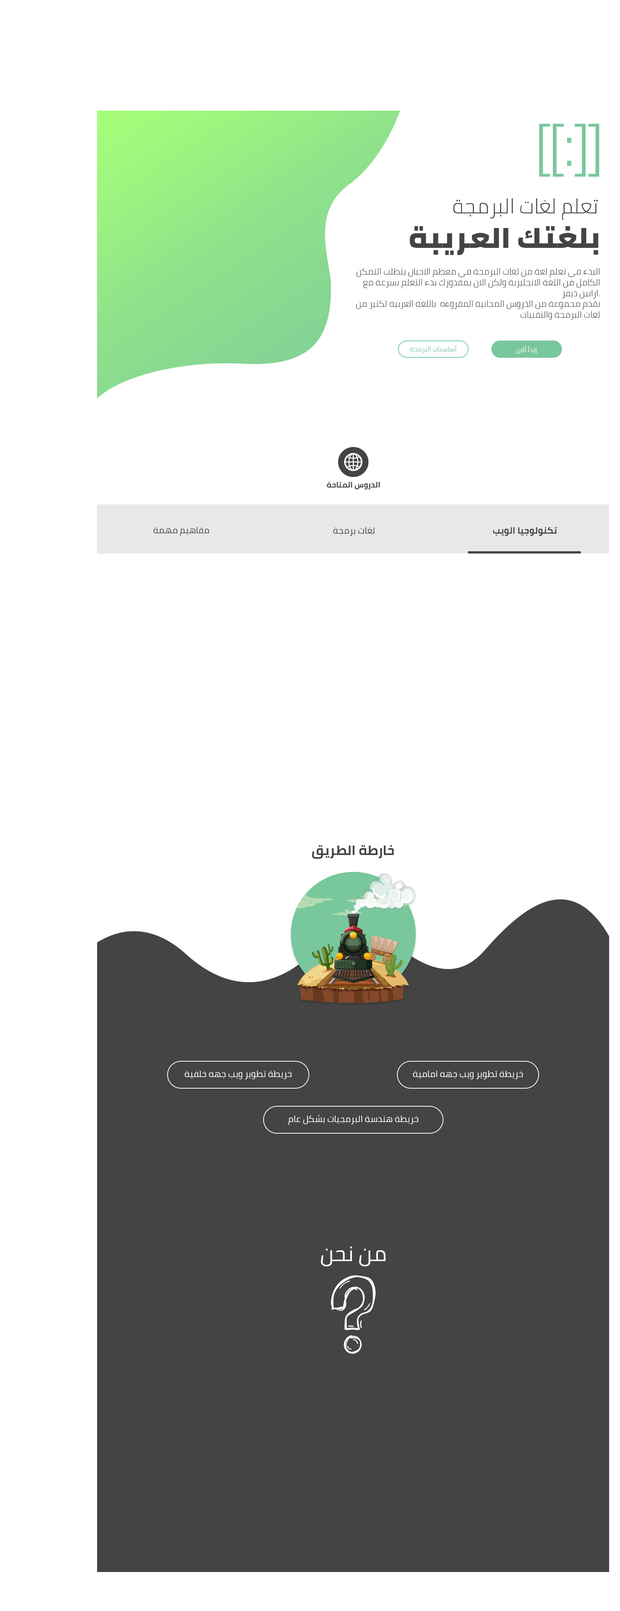
<style>
.page{position:relative;width:620px;height:1611px;background:#ffffff}
.page>*{position:absolute;margin:0}
.t1{font:20.5px "Cairo-Light";color:#444444}
.t2{font:29.2px "Cairo-Black";color:#444444}
.t3{font:9px "Cairo-Light";color:#444444}
.t4{font:6.8px "Cairo-Regular";color:#79c79c}
.t5{font:6.8px "Cairo-Regular";color:#ffffff}
.t6{font:7.8px "Cairo-Bold";color:#444444}
.t7{font:9px "Cairo-Regular";color:#444444}
.t8{font:9px "Cairo-Bold";color:#444444}
.t9{font:13.5px "Cairo-Bold";color:#444444}
.t10{font:9px "Cairo-Regular";color:#ffffff}
.t11{font:21.4px "Cairo-Regular";color:#ffffff}
</style>
<div class="page">
<p class="t1" style="left:453px;top:198px;width:145px;height:22px">تعلم لغات البرمجة</p>
<p class="t2" style="left:410px;top:226px;width:188px;height:29px">بلغتك العريبة</p>
<p class="t3" style="left:356px;top:268px;width:244px;height:52px;text-align:right">البدء في تعلم لغة من لغات البرمجة في معظم الاحيان يتطلب التمكن الكامل من اللغة الانجليزية ولكن الان بمقدورك بدء التعلم بسرعة مع ارابين ديفز.<br>نقدم مجموعة من الدروس المجانية المقروءه  باللغة العربية لكثير من لغات البرمجة والتقنيات</p>
<p class="t4" style="left:410px;top:345px;width:47px;height:8px">أساسيات البرمجة</p>
<p class="t5" style="left:517px;top:346px;width:20px;height:8px">إبدأ ألان</p>
<p class="t6" style="left:327px;top:482px;width:53px;height:7px">الدروس المتاحة</p>
<p class="t7" style="left:153px;top:527px;width:56px;height:9px">مفاهيم مهمة</p>
<p class="t7" style="left:333px;top:527px;width:42px;height:9px">لغات برمجة</p>
<p class="t8" style="left:493px;top:527px;width:64px;height:9px">تكنولوجيا الويب</p>
<p class="t9" style="left:312px;top:845px;width:82px;height:14px">خارطة الطريق</p>
<p class="t10" style="left:184px;top:1071px;width:108px;height:8px">خريطة تطوير ويب جهه خلفية</p>
<p class="t10" style="left:413px;top:1071px;width:110px;height:8px">خريطة تطوير ويب جهه امامية</p>
<p class="t10" style="left:288px;top:1114px;width:130px;height:11px">خريطة هندسة البرمجيات بشكل عام</p>
<p class="t11" style="left:321px;top:1246px;width:65px;height:20px">من نحن</p>
</div>
